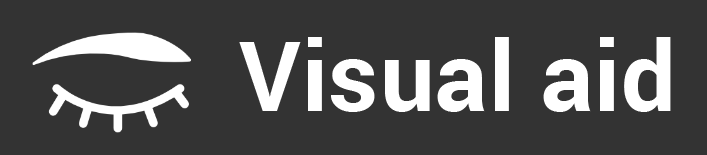
<style>
.page{position:relative;width:707px;height:155px;background:#333333}
.page>*{position:absolute;margin:0}
.t1{font:97px "Roboto-Bold";letter-spacing:0.01em;color:#ffffff}
</style>
<div class="page">
<p class="t1" style="left:239px;top:37px;width:432px;height:75px">Visual aid</p>
</div>
